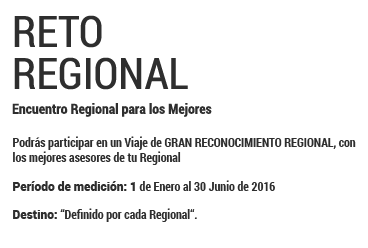
<style>
.page{position:relative;width:368px;height:248px;background:#ffffff}
.page>*{position:absolute;margin:0}
.t1{font:14px/25px "RobotoCondensed-Bold";color:#2e2e2e}
.t2{font:43px/42px "RobotoCondensed-Regular";color:#2e2e2e;text-transform:uppercase}
.t3{font:12px "RobotoCondensed-Bold";color:#2e2e2e}
.t4{font:12px "Roboto-Black";color:#2e2e2e}
</style>
<div class="page">
<p class="t1" style="left:12px;top:15px;width:200px;height:102px"><span class="t2">reto <br>Regional<br></span>Encuentro Regional para los Mejores</p>
<p class="t3" style="left:13px;top:136px;width:343px;height:86px">Podrás participar en un Viaje de GRAN RECONOCIMIENTO REGIONAL, con los mejores asesores de tu Regional<br><br><span class="t4">Período de medición: 1</span> de Enero al 30 Junio de 2016<br><br><span class="t4">Destino: </span>“Definido por cada Regional“.</p>
</div>
